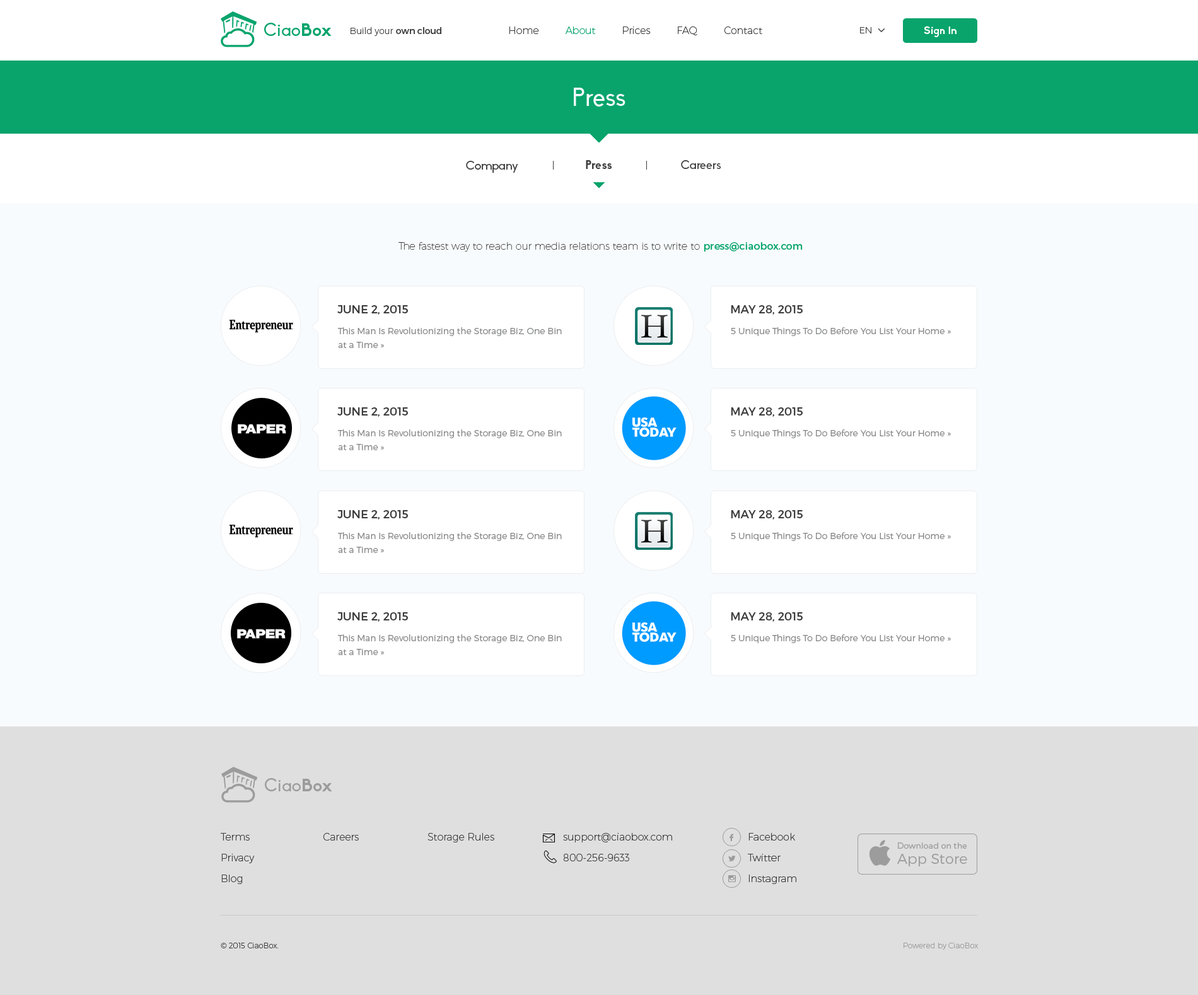
<style>
.page{position:relative;width:1198px;height:995px;background:#f8fbfd}
.page>*{position:absolute;margin:0}
.t1{font:17.7px "Biko";color:#08a46c}
.t2{font:17.7px "Biko-Bold";color:#08a46c}
.t3{font:8.8px "Montserrat-UltraLight";color:#3d3d3d}
.t4{font:8.8px "Montserrat-Regular";color:#3d3d3d}
.t5{font:10.1px "Montserrat-UltraLight";color:#3d3d3d}
.t6{font:10.1px "Montserrat-UltraLight";color:#08a46c}
.t7{font:10.7px "Biko-Bold";color:#ffffff}
.t8{font:25.2px "Biko";color:#f8fbfd}
.t9{font:12px "Biko";color:#3d3d3d}
.t10{font:12px "Biko-Bold";color:#3d3d3d}
.t11{font:10.1px "Montserrat-Hairline";color:#3d3d3d}
.t12{font:10.1px "Montserrat-Regular";color:#08a46c}
.t13{font:11.4px "Montserrat-Regular";color:#3d3d3d;text-transform:uppercase}
.t14{font:8.8px/13.9px "Montserrat-Light";color:#878888}
.t15{font:8.8px "Montserrat-Light";color:#878888}
.t16{font:17.7px "Biko";color:#9c9c9c}
.t17{font:17.7px "Biko-Bold";color:#9c9c9c}
.t18{font:10.1px/20.8px "Montserrat-UltraLight";color:#3d3d3d}
.t19{font:12px "Socialico";color:#9c9c9c;text-transform:uppercase}
.t20{font:8.2px/20.8px "Montserrat-Light";color:#9c9c9c}
.t21{font:14.3px/15.1px "Montserrat-Light";color:#9c9c9c}
.t22{font:7.6px "font2985";color:#9c9c9c}
.t23{font:7.6px "Montserrat-UltraLight";color:#3d3d3d}
.t24{font:7.6px "Montserrat-UltraLight";color:#9c9c9c}
</style>
<div class="page">
<p class="t1" style="left:264px;top:23px;width:68px;height:13px">Ciao<span class="t2">Box</span></p>
<p class="t3" style="left:351px;top:27px;width:90px;height:9px">Build your <span class="t4">own cloud</span></p>
<p class="t5" style="left:509px;top:26px;width:253px;height:9px">Home         <span class="t6">About         </span>Prices         FAQ         Contact</p>
<p class="t3" style="left:860px;top:27px;width:12px;height:6px">EN</p>
<p class="t7" style="left:924px;top:26px;width:33px;height:11px">Sign In</p>
<p class="t8" style="left:574px;top:88px;width:52px;height:19px">Press</p>
<p class="t9" style="left:466px;top:161px;width:52px;height:12px">Company</p>
<p class="t10" style="left:586px;top:160px;width:26px;height:9px">Press</p>
<p class="t9" style="left:681px;top:160px;width:40px;height:9px">Careers</p>
<p class="t11" style="left:399px;top:242px;width:404px;height:10px">The fastest way to reach our media relations team is to write to <span class="t12">press@ciaobox.com</span></p>
<p class="t13" style="left:337px;top:305px;width:71px;height:10px">June 2, 2015</p>
<p class="t13" style="left:731px;top:305px;width:72px;height:10px">May 28, 2015</p>
<p class="t14" style="left:337px;top:327px;width:225px;height:21px">This Man Is Revolutionizing the Storage Biz, One Bin at a Time »</p>
<p class="t15" style="left:731px;top:327px;width:220px;height:9px">5 Unique Things To Do Before You List Your Home »</p>
<p class="t13" style="left:337px;top:407px;width:71px;height:10px">June 2, 2015</p>
<p class="t13" style="left:731px;top:407px;width:72px;height:10px">May 28, 2015</p>
<p class="t14" style="left:337px;top:429px;width:225px;height:21px">This Man Is Revolutionizing the Storage Biz, One Bin at a Time »</p>
<p class="t15" style="left:731px;top:429px;width:220px;height:9px">5 Unique Things To Do Before You List Your Home »</p>
<p class="t13" style="left:337px;top:510px;width:71px;height:10px">June 2, 2015</p>
<p class="t13" style="left:731px;top:510px;width:72px;height:10px">May 28, 2015</p>
<p class="t14" style="left:337px;top:532px;width:225px;height:21px">This Man Is Revolutionizing the Storage Biz, One Bin at a Time »</p>
<p class="t15" style="left:731px;top:532px;width:220px;height:9px">5 Unique Things To Do Before You List Your Home »</p>
<p class="t13" style="left:337px;top:612px;width:71px;height:10px">June 2, 2015</p>
<p class="t13" style="left:731px;top:612px;width:72px;height:10px">May 28, 2015</p>
<p class="t14" style="left:337px;top:634px;width:225px;height:21px">This Man Is Revolutionizing the Storage Biz, One Bin at a Time »</p>
<p class="t15" style="left:731px;top:634px;width:220px;height:9px">5 Unique Things To Do Before You List Your Home »</p>
<p class="t16" style="left:265px;top:778px;width:67px;height:13px">Ciao<span class="t17">Box</span></p>
<p class="t18" style="left:221px;top:833px;width:33px;height:51px">Terms<br>Privacy<br>Blog</p>
<p class="t5" style="left:323px;top:833px;width:36px;height:8px">Careers</p>
<p class="t5" style="left:428px;top:833px;width:66px;height:10px">Storage Rules</p>
<p class="t18" style="left:563px;top:833px;width:109px;height:28px">support@ciaobox.com<br>800-256-9633</p>
<p class="t19" style="left:729px;top:834px;width:4px;height:7px">F</p>
<p class="t18" style="left:748px;top:833px;width:49px;height:51px">Facebook<br>Twitter<br>Instagram</p>
<p class="t20" style="left:897px;top:843px;width:70px;height:24px">Download on the<br><span class="t21">App Store</span></p>
<p class="t19" style="left:728px;top:856px;width:8px;height:5px">L</p>
<p class="t22" style="left:728px;top:875px;width:8px;height:7px">x</p>
<p class="t23" style="left:221px;top:943px;width:58px;height:5px">© 2015 CiaoBox.</p>
<p class="t24" style="left:904px;top:943px;width:74px;height:7px">Powered by CiaoBox</p>
</div>
